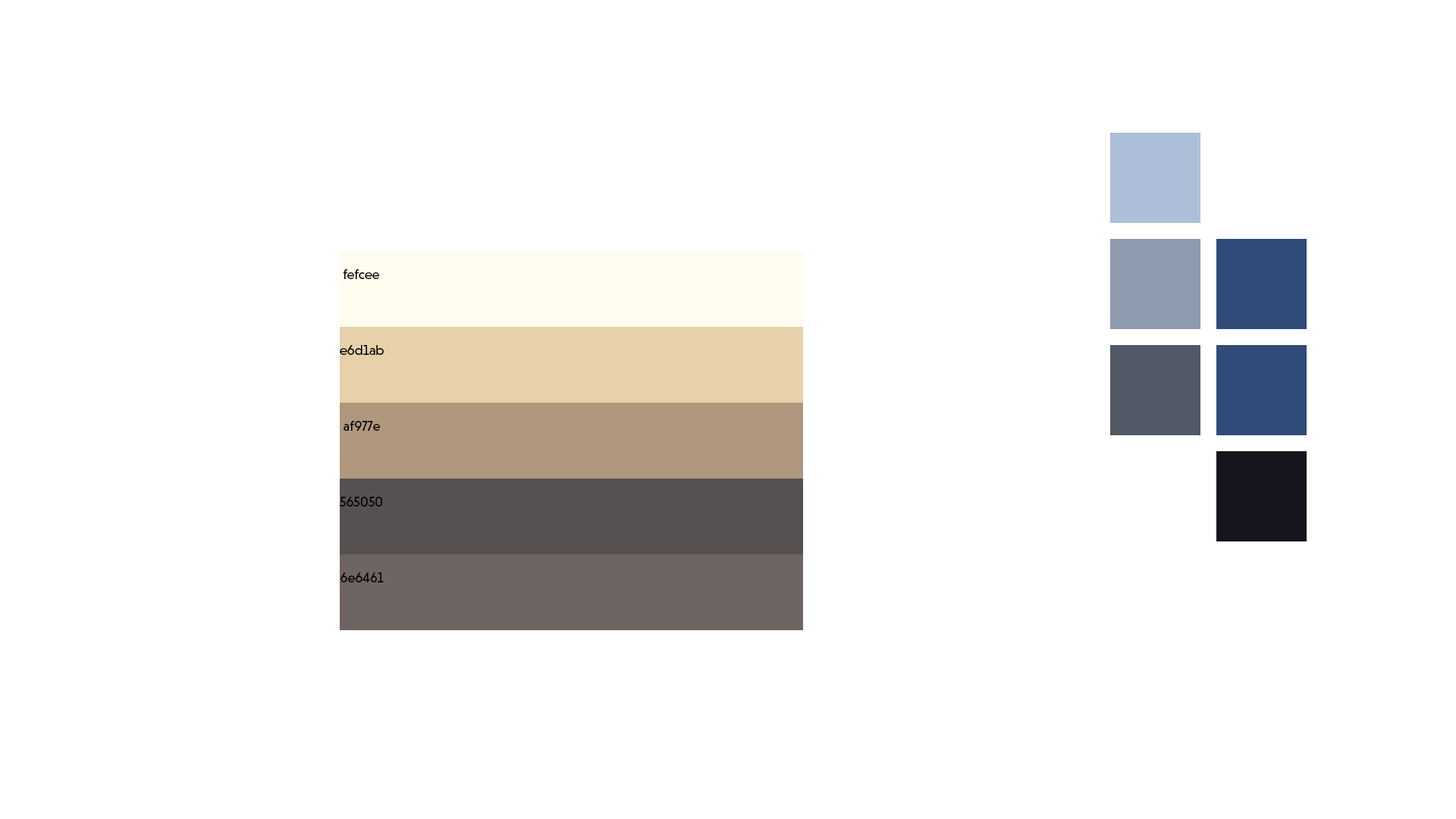
<style>
.page{position:relative;width:1456px;height:819px;background:#ffffff}
.page>*{position:absolute;margin:0}
.t1{font:13.6px "NiveauGroteskRegular";color:#000000}
</style>
<div class="page">
<p class="t1" style="left:343px;top:269px;width:36px;height:10px">fefcee</p>
<p class="t1" style="left:340px;top:345px;width:44px;height:10px">e6d1ab</p>
<p class="t1" style="left:344px;top:421px;width:36px;height:10px">af977e</p>
<p class="t1" style="left:340px;top:497px;width:42px;height:10px">565050</p>
<p class="t1" style="left:340px;top:573px;width:44px;height:9px">6e6461</p>
</div>
